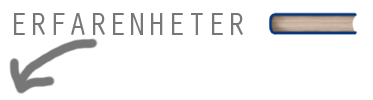
<style>
.page{position:relative;width:373px;height:100px;background:#ffffff}
.page>*{position:absolute;margin:0}
.t1{font:33px "OratorStd";color:#777777}
</style>
<div class="page">
<p class="t1" style="left:14px;top:13px;width:229px;height:22px">ERFARENHETER</p>
</div>
